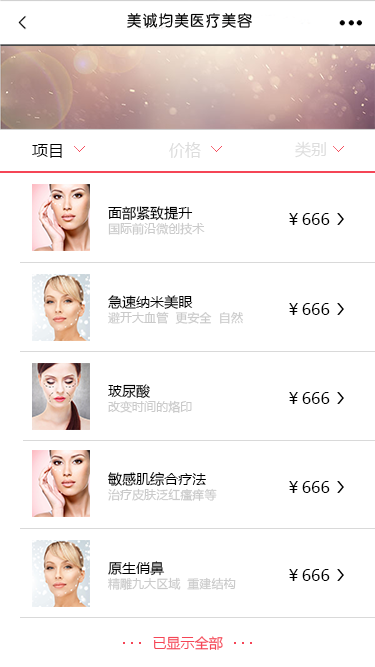
<style>
.page{position:relative;width:375px;height:667px;background:#ffffff}
.page>*{position:absolute;margin:0}
.t1{font:16px "MicrosoftYaHei";letter-spacing:0.005em;color:#000000}
.t2{font:16px "MicrosoftYaHei";letter-spacing:0.005em;color:#dddddd}
.t3{font:14px "MicrosoftYaHei";letter-spacing:0.005em;color:#000000}
.t4{font:12px "MicrosoftYaHei";letter-spacing:0.005em;color:#cacaca}
.t5{font:14px "MicrosoftYaHei";letter-spacing:0.005em;color:#f54556}
</style>
<div class="page">
<p class="t1" style="left:32px;top:144px;width:30px;height:14px">项目</p>
<p class="t2" style="left:169px;top:142px;width:32px;height:16px">价格</p>
<p class="t2" style="left:295px;top:141px;width:31px;height:17px">类别</p>
<p class="t3" style="left:108px;top:206px;width:85px;height:15px">面部紧致提升</p>
<p class="t4" style="left:108px;top:222px;width:97px;height:13px">国际前沿微创技术</p>
<p class="t1" style="left:289px;top:213px;width:41px;height:12px">￥666</p>
<p class="t3" style="left:108px;top:295px;width:85px;height:14px">急速纳米美眼</p>
<p class="t1" style="left:289px;top:303px;width:41px;height:12px">￥666</p>
<p class="t4" style="left:108px;top:311px;width:135px;height:13px">避开大血管  更安全  自然</p>
<p class="t3" style="left:108px;top:384px;width:42px;height:14px">玻尿酸</p>
<p class="t4" style="left:108px;top:400px;width:84px;height:13px">改变时间的烙印</p>
<p class="t1" style="left:289px;top:392px;width:41px;height:12px">￥666</p>
<p class="t3" style="left:108px;top:472px;width:98px;height:14px">敏感肌综合疗法</p>
<p class="t1" style="left:289px;top:481px;width:41px;height:12px">￥666</p>
<p class="t4" style="left:108px;top:488px;width:109px;height:13px">治疗皮肤泛红瘙痒等</p>
<p class="t3" style="left:108px;top:561px;width:57px;height:15px">原生俏鼻</p>
<p class="t1" style="left:289px;top:569px;width:41px;height:12px">￥666</p>
<p class="t4" style="left:108px;top:577px;width:128px;height:13px">精雕九大区域  重建结构</p>
<p class="t5" style="left:153px;top:636px;width:70px;height:14px">已显示全部</p>
</div>
